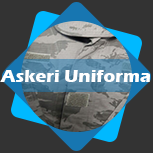
<style>
.page{position:relative;width:153px;height:153px;background:#333333}
.page>*{position:absolute;margin:0}
.t1{font:18.5px "ErasITC-Bold";color:#ffffff}
</style>
<div class="page">
<p class="t1" style="left:0px;top:70px;width:150px;height:12px">Askeri Uniforma</p>
</div>
